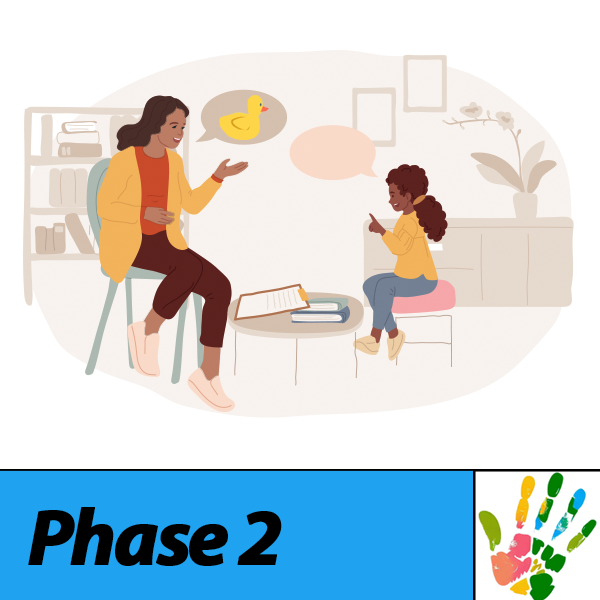
<style>
.page{position:relative;width:600px;height:600px;background:#ffffff}
.page>*{position:absolute;margin:0}
.t1{font:80px "MyriadPro-BoldIt";letter-spacing:-0.05em;color:#000000;font-weight:bold}
</style>
<div class="page">
<p class="t1" style="left:28px;top:507px;width:254px;height:59px">Phase 2</p>
</div>
